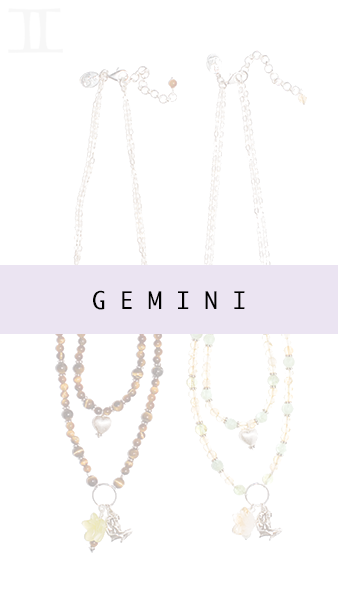
<style>
.page{position:relative;width:338px;height:600px;background:#ffffff}
.page>*{position:absolute;margin:0}
.t1{font:23.5px "Ayuthaya";color:#000000}
</style>
<div class="page">
<p class="t1" style="left:93px;top:290px;width:152px;height:20px">G E M I N I</p>
</div>
